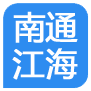
<style>
.page{position:relative;width:91px;height:91px;background:#2d8cf0}
.page>*{position:absolute;margin:0}
.t1{font:32px "MicrosoftYaHei";color:#fffefe;font-weight:bold}
</style>
<div class="page">
<p class="t1" style="left:13px;top:11px;width:65px;height:32px">南通</p>
<p class="t1" style="left:12px;top:48px;width:66px;height:32px">江海</p>
</div>
